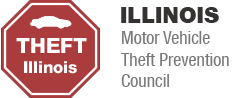
<style>
.page{position:relative;width:241px;height:98px;background:#ffffff}
.page>*{position:absolute;margin:0}
.t1{font:22px "HelveticaNeueLT-Black";color:#353232}
.t2{font:18px "HelveticaNeueLT-Condensed";color:#797878}
</style>
<div class="page">
<p class="t1" style="left:121px;top:7px;width:98px;height:16px">ILLINOIS</p>
<p class="t2" style="left:121px;top:31px;width:108px;height:56px">Motor Vehicle<br>Theft Prevention<br>Council</p>
</div>
